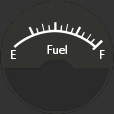
<style>
.page{position:relative;width:114px;height:114px;background:#333330}
.page>*{position:absolute;margin:0}
.t1{font:12px "MyriadPro-Regular";color:#ffffff}
</style>
<div class="page">
<p class="t1" style="left:11px;top:50px;width:5px;height:9px">E</p>
<p class="t1" style="left:47px;top:45px;width:20px;height:9px">Fuel</p>
<p class="t1" style="left:100px;top:50px;width:5px;height:9px">F</p>
</div>
